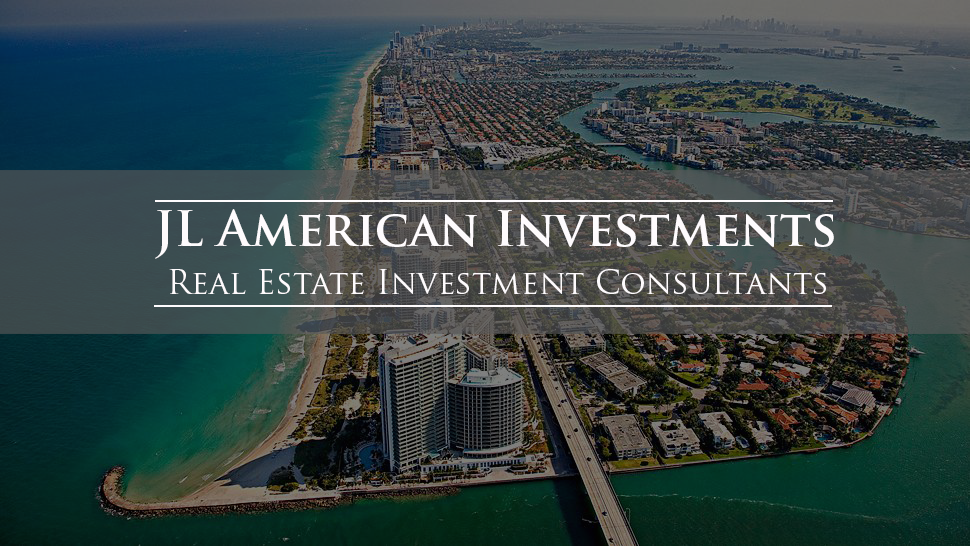
<style>
.page{position:relative;width:970px;height:546px}
.page>*{position:absolute;margin:0}
.t1{font:48px "TrajanPro-Bold";color:#fefbfd}
.t2{font:32px "TrajanPro-Regular";color:#fefbfd}
</style>
<div class="page">
<p class="t1" style="left:155px;top:209px;width:679px;height:50px">JL American Investments</p>
<p class="t2" style="left:169px;top:269px;width:657px;height:25px">Real Estate Investment Consultants</p>
</div>
